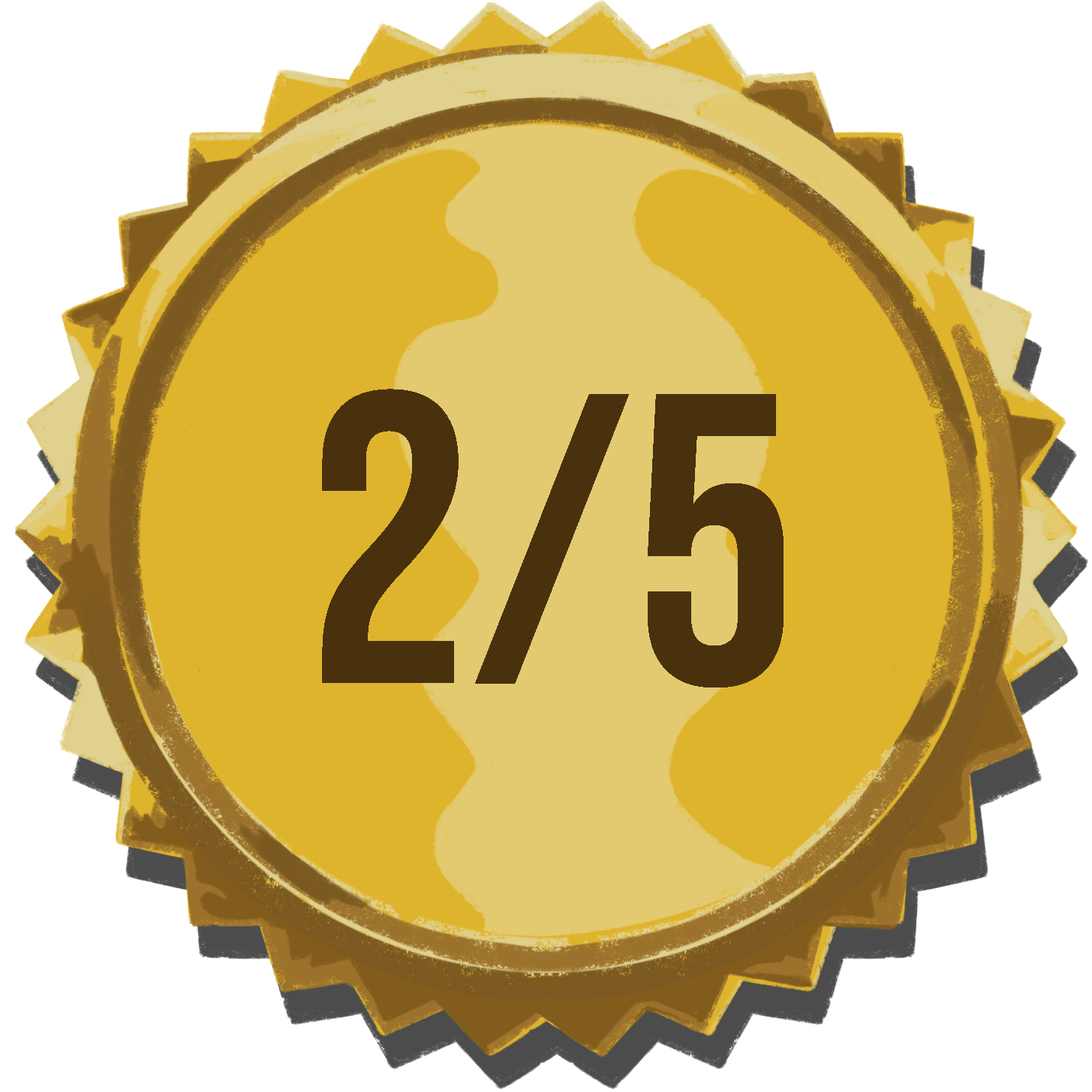
<style>
.page{position:relative;width:1092px;height:1092px;background:#ffffff}
.page>*{position:absolute;margin:0}
.t1{font:412.8px "BebasNeue-Regular";color:#49310d}
</style>
<div class="page">
<p class="t1" style="left:322px;top:389px;width:462px;height:298px">2/5</p>
</div>
